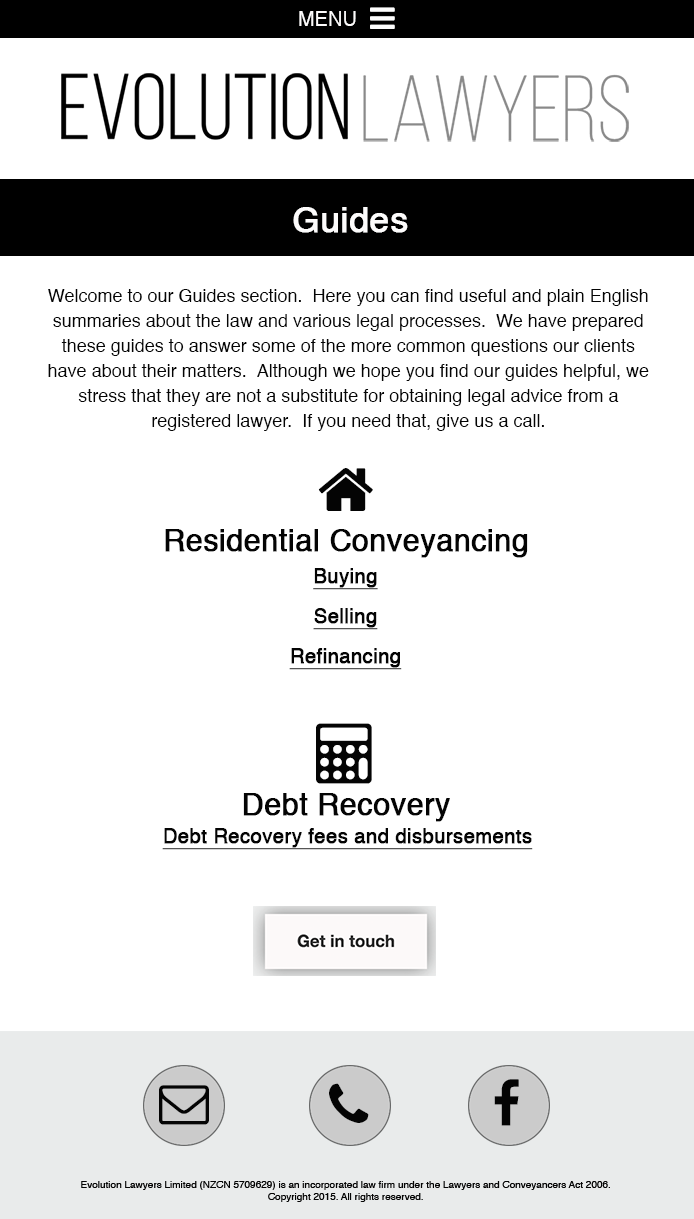
<style>
.page{position:relative;width:694px;height:1219px;background:#ffffff}
.page>*{position:absolute;margin:0}
.t1{font:20px "Helvetica";color:#fdfcfc}
.t2{font:35px "Helvetica";color:#fdfcfc;font-weight:bold}
.t3{font:18px/25px "Helvetica";color:#040404}
.t4{font:20px/40px "Helvetica";color:#040404;font-weight:bold;text-decoration:underline}
.t5{font:50px/40px "FontAwesome";color:#040404}
.t6{font:20px "Helvetica";color:#040404;font-weight:bold;text-decoration:underline}
.t7{font:50px "FontAwesome";color:#040404}
</style>
<div class="page">
<p class="t1" style="left:299px;top:11px;width:57px;height:15px">MENU</p>
<p class="t2" style="left:293px;top:207px;width:115px;height:26px">Guides</p>
<p class="t3" style="left:48px;top:289px;width:601px;height:142px;text-align:center">Welcome to our Guides section.  Here you can find useful and plain English summaries about the law and various legal processes.  We have prepared these guides to answer some of the more common questions our clients have about their matters.  Although we hope you find our guides helpful, we stress that they are not a substitute for obtaining legal advice from a <br>registered lawyer.  If you need that, give us a call.</p>
<p class="t4" style="left:289px;top:568px;width:113px;height:102px;text-align:center"><span class="t5"><br></span>Buying<br>Selling<br>Refinancing</p>
<p class="t6" style="left:162px;top:828px;width:371px;height:22px"><span class="t7"><br></span>Debt Recovery fees and disbursements</p>
</div>
